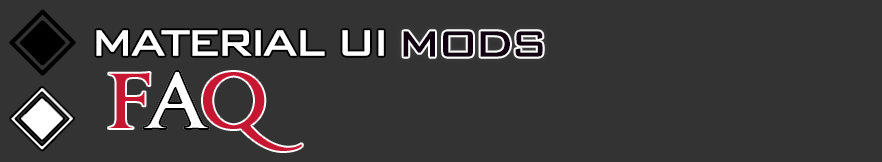
<style>
.page{position:relative;width:882px;height:162px;background:#333333}
.page>*{position:absolute;margin:0}
.t1{font:72px "Gulim";letter-spacing:-0.1em;color:#000000;font-weight:bold}
.t2{font:48px "BankGothic";letter-spacing:-0.1em;color:#ffffff;font-weight:bold}
.t3{font:48px "BankGothic";letter-spacing:-0.1em;color:#100010;font-weight:bold}
.t4{font:48px "BankGothic";letter-spacing:-0.1em;color:#c71632;font-weight:bold}
.t5{font:72px "JupiterPro-Bold";letter-spacing:-0.1em;color:#c61632;font-weight:bold}
.t6{font:72px "JupiterPro-Bold";letter-spacing:-0.1em;color:#ffffff;font-weight:bold}
.t7{font:69px "Gulim";letter-spacing:-0.1em;color:#ffffff;font-weight:bold}
</style>
<div class="page">
<p class="t1" style="left:9px;top:9px;width:67px;height:67px">◈</p>
<p class="t2" style="left:96px;top:30px;width:288px;height:26px">MATERIAL UI</p>
<p class="t3" style="left:403px;top:31px;width:140px;height:26px"><span class="t4">                     </span>MODS</p>
<p class="t5" style="left:108px;top:71px;width:195px;height:81px">F<span class="t6">A</span>Q</p>
<p class="t6" style="left:143px;top:71px;width:66px;height:58px">A</p>
<p class="t7" style="left:10px;top:87px;width:64px;height:64px">◈</p>
</div>
